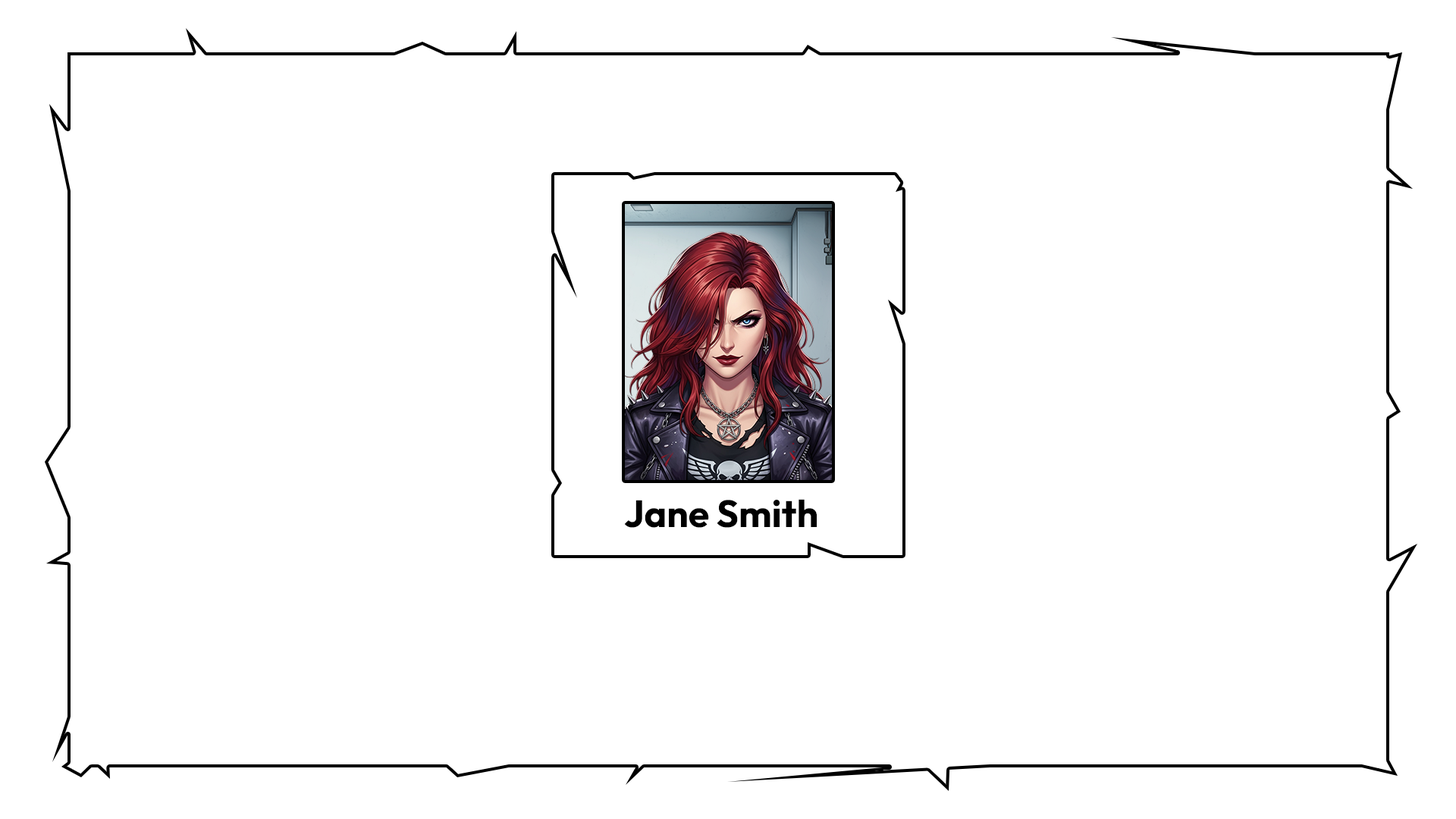
<style>
.page{position:relative;width:1456px;height:819px;background:#ffffff}
.page>*{position:absolute;margin:0}
.t1{font:37.9px "Outfit-Bold";color:#000000}
</style>
<div class="page">
<p class="t1" style="left:624px;top:499px;width:193px;height:29px">Jane Smith</p>
</div>
